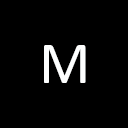
<style>
.page{position:relative;width:128px;height:128px;background:#000000}
.page>*{position:absolute;margin:0}
.t1{font:60px "Calibri";color:#feffff}
</style>
<div class="page">
<p class="t1" style="left:44px;top:45px;width:42px;height:38px">M</p>
</div>
